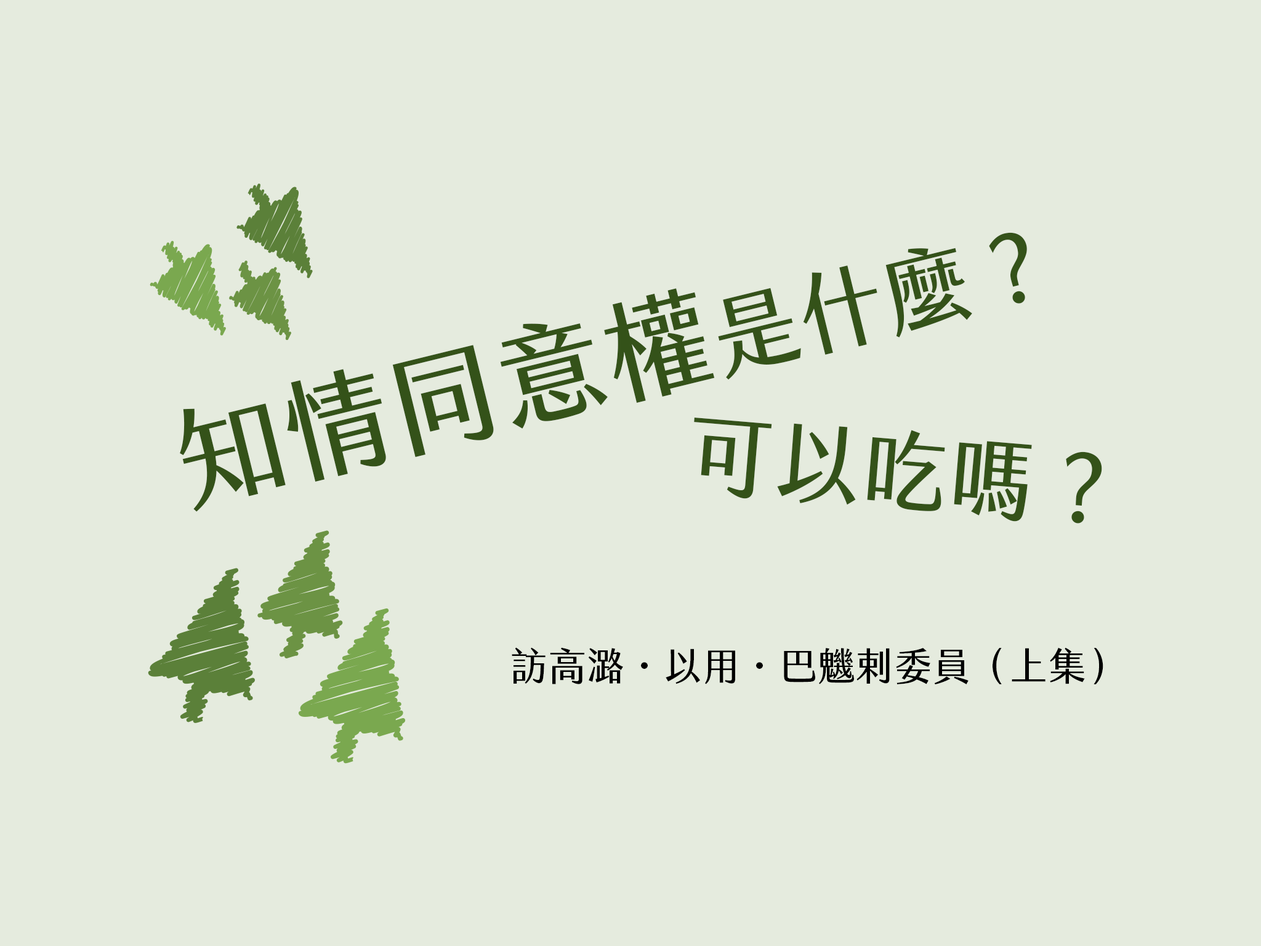
<style>
.page{position:relative;width:1261px;height:946px;background:#e5ebde}
.page>*{position:absolute;margin:0}
.t1{font:109.9px "jf-jinxuan-fresh-Medium";color:#345219}
.t2{font:87.9px "jf-jinxuan-fresh-Medium";color:#345219}
.t3{font:38.5px "jf-jinxuan-fresh-Medium";color:#000000}
</style>
<div class="page">
<p class="t1" style="left:180px;top:232px;width:847px;height:280px;rotate:-14deg">知情同意權<span class="t2">是什麼？</span></p>
<p class="t2" style="left:694px;top:417px;width:408px;height:106px;rotate:5deg">可以吃嗎？</p>
<p class="t3" style="left:512px;top:647px;width:591px;height:38px">訪高潞·以用·巴魕剌委員（上集）</p>
</div>
